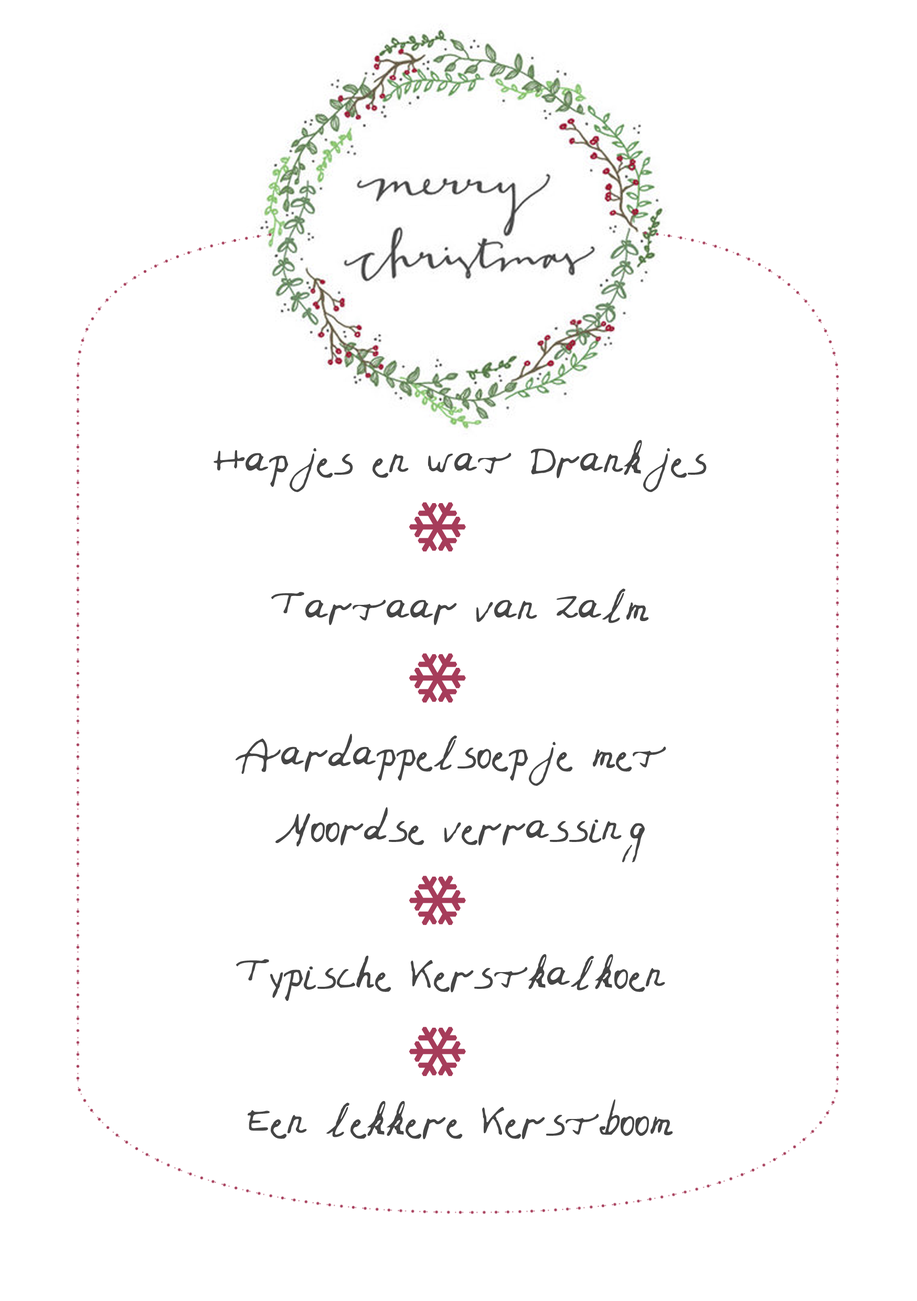
<style>
.page{position:relative;width:917px;height:1301px;background:#ffffff}
.page>*{position:absolute;margin:0}
.t1{font:61.2px "Jolenee";color:#454545}
</style>
<div class="page">
<p class="t1" style="left:213px;top:440px;width:493px;height:699px;text-align:center">Hapjes en wat Drankjes<br><br>Tartaar van Zalm<br><br>Aardappelsoepje met <br>Noordse verrassing<br><br>Typische Kerstkalkoen <br><br>Een lekkere Kerstboom</p>
</div>
